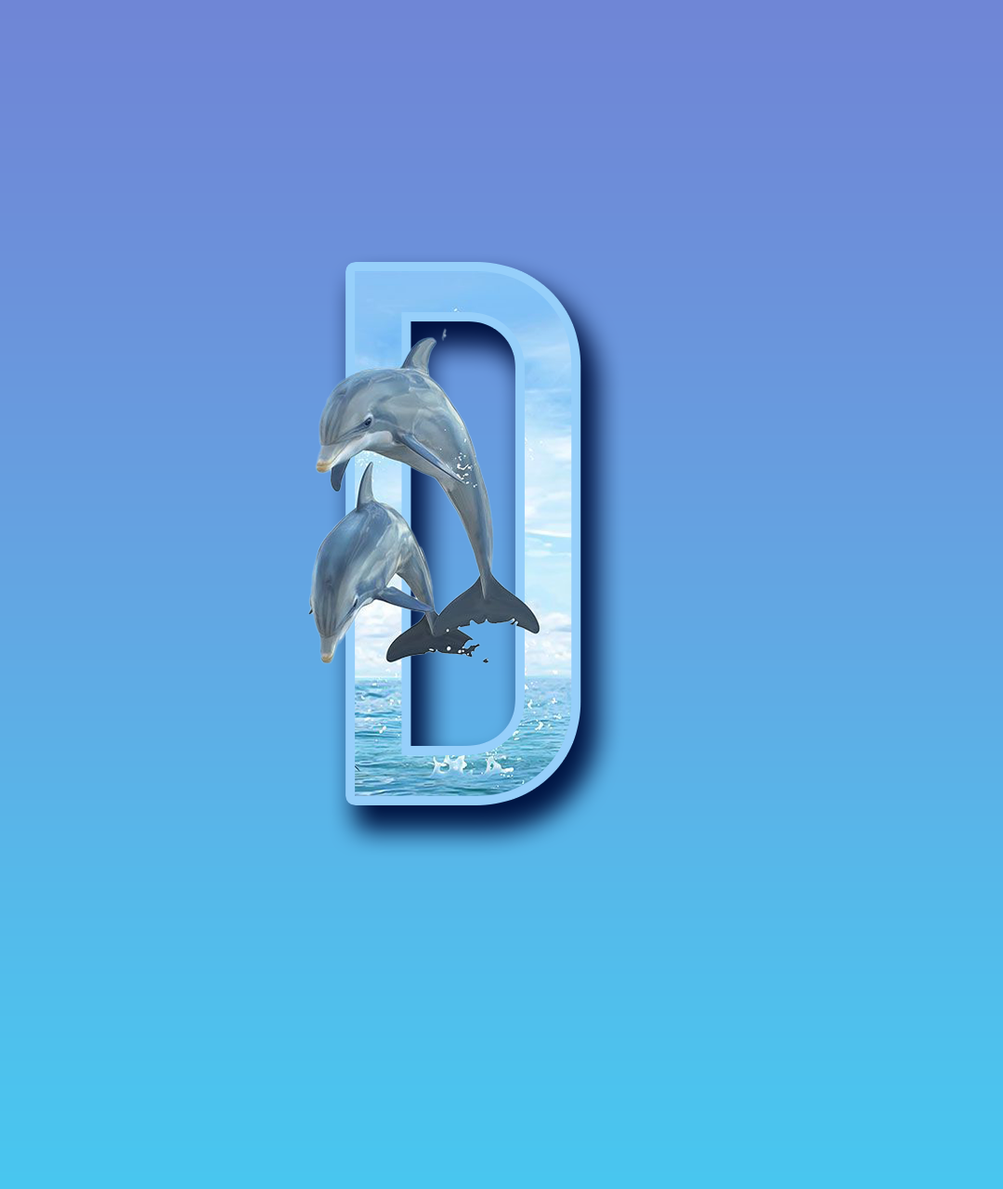
<style>
.page{position:relative;width:1003px;height:1189px}
.page>*{position:absolute;margin:0}
.t1{font:686.8px "AgencyFB-Reg";letter-spacing:0.025em}
</style>
<div class="page">
<p class="t1" style="left:355px;top:271px;width:217px;height:525px">D</p>
</div>
